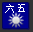
<style>
.page{position:relative;width:33px;height:32px;background:#000090}
.page>*{position:absolute;margin:0}
.t1{font:10.4px "SimSun";color:#ffffff}
</style>
<div class="page">
<p class="t1" style="left:5px;top:4px;width:20px;height:9px">六五</p>
</div>
